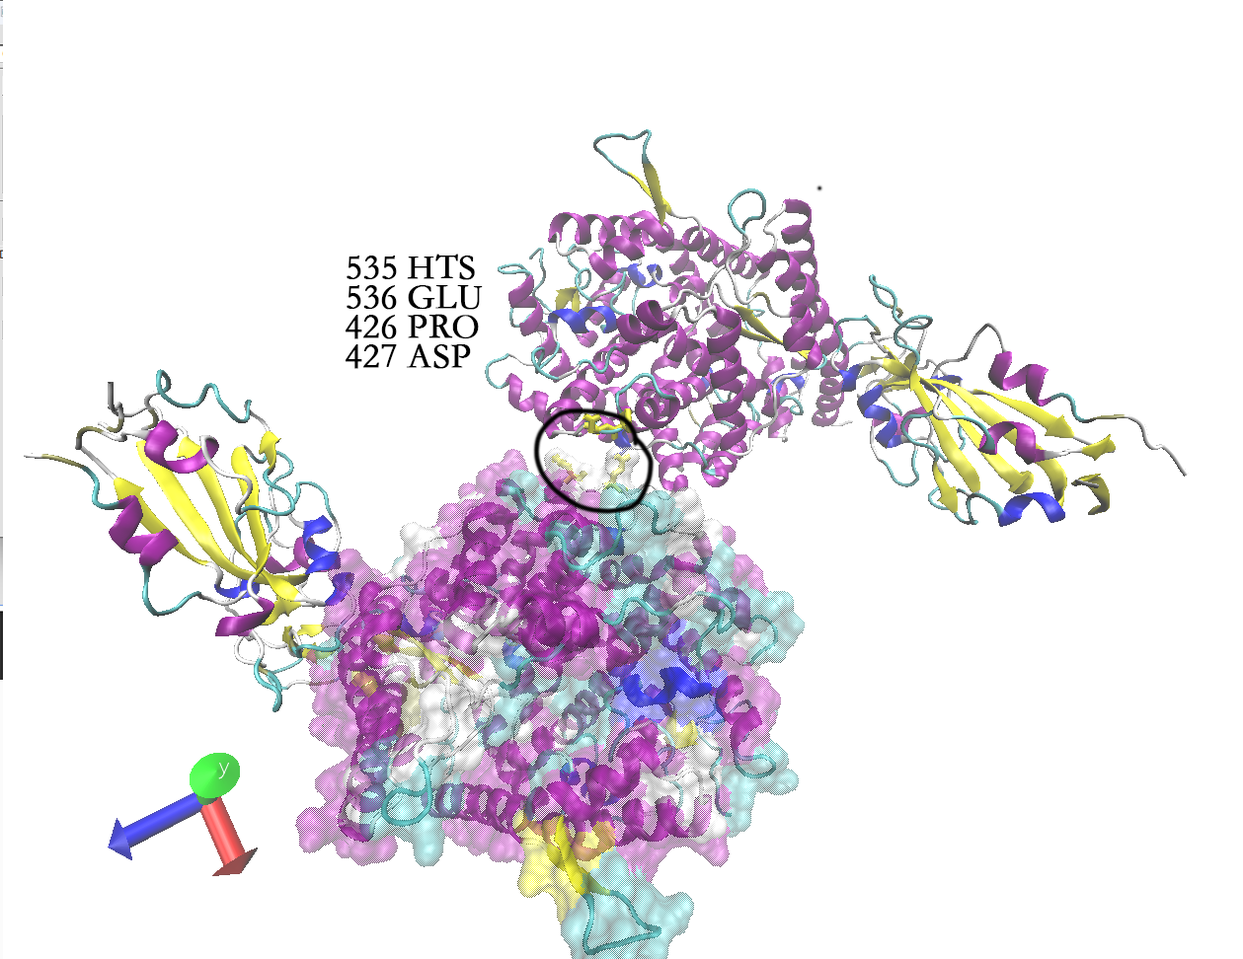
<style>
.page{position:relative;width:1243px;height:959px;background:#ffffff}
.page>*{position:absolute;margin:0}
.t1{font:35.5px/29.6px "STKaiti";color:#000000;font-weight:bold}
</style>
<div class="page">
<p class="t1" style="left:345px;top:254px;width:138px;height:115px">535 HTS<br>536 GLU<br>426 PRO<br>427 ASP</p>
</div>
